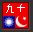
<style>
.page{position:relative;width:33px;height:32px;background:#f20000}
.page>*{position:absolute;margin:0}
.t1{font:10.4px "SimSun";color:#ffffff}
</style>
<div class="page">
<p class="t1" style="left:6px;top:4px;width:19px;height:9px">九十</p>
</div>
